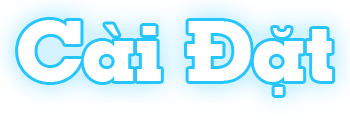
<style>
.page{position:relative;width:350px;height:120px;background:#ffffff}
.page>*{position:absolute;margin:0}
.t1{font:83.3px "GeoSlab703-Extra";color:#ffffff}
</style>
<div class="page">
<p class="t1" style="left:18px;top:20px;width:315px;height:75px">Cài Đặt</p>
</div>
